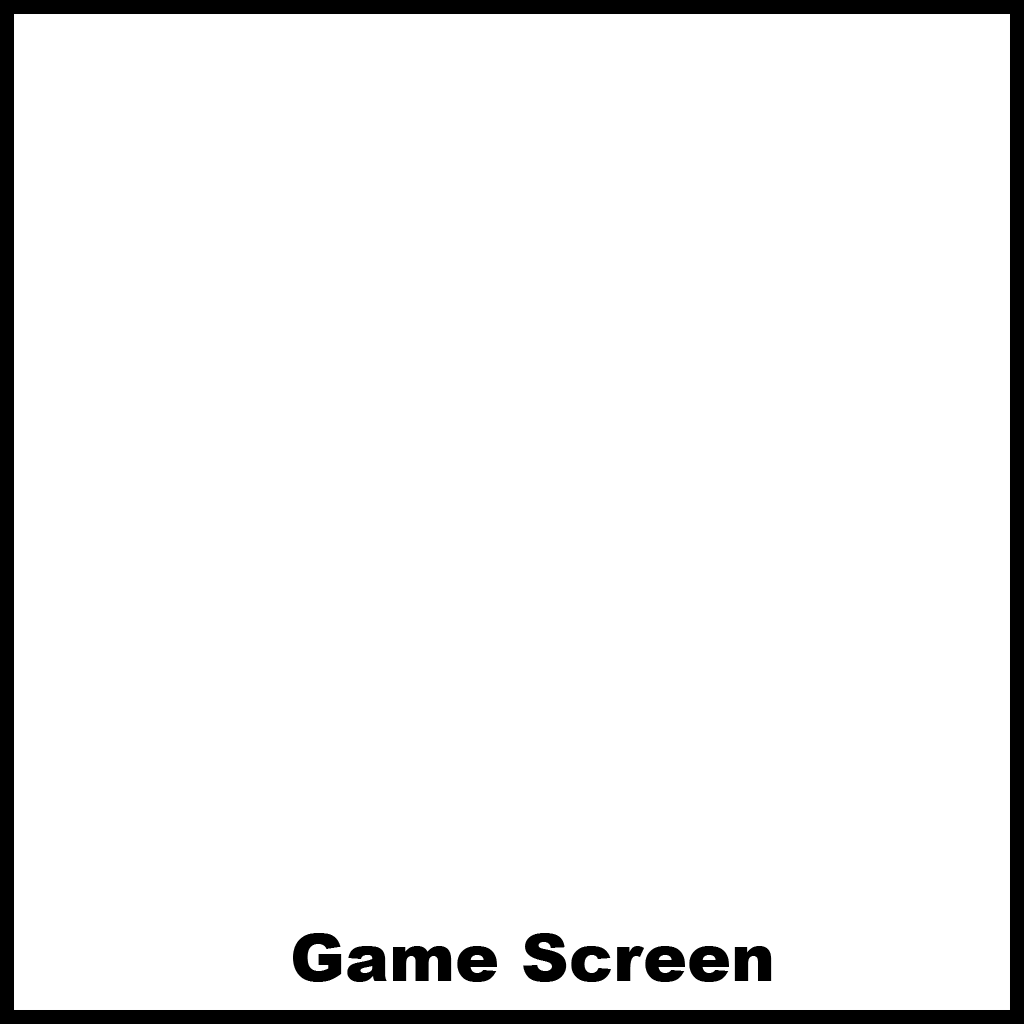
<style>
.page{position:relative;width:1024px;height:1024px;background:#ffffff}
.page>*{position:absolute;margin:0}
.t1{font:66px "Arial-Black";color:#000000}
</style>
<div class="page">
<p class="t1" style="left:293px;top:933px;width:479px;height:49px">Game Screen</p>
</div>
